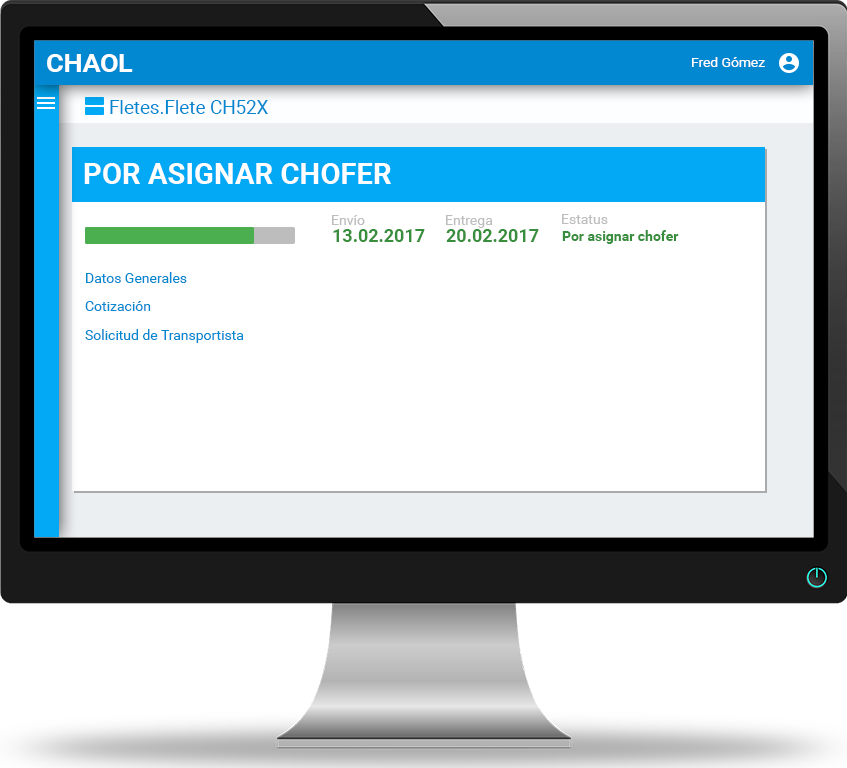
<style>
.page{position:relative;width:847px;height:768px;background:#ffffff}
.page>*{position:absolute;margin:0}
.t1{font:25.7px "Roboto-Bold";color:#ffffff}
.t2{font:13.3px "Roboto-Regular";color:#ffffff;scale:1.04 1}
.t3{font:18.6px "Roboto-Regular";color:#0288d1}
.t4{font:29.1px "Roboto-Bold";color:#ffffff}
.t5{font:14px "Roboto-Regular";color:#bdbdbd}
.t6{font:18px "Roboto-Bold";color:#388e3c}
.t7{font:14px "Roboto-Bold";color:#388e3c}
.t8{font:14.2px "Roboto-Regular";color:#0288d1}
</style>
<div class="page">
<p class="t1" style="left:47px;top:54px;width:86px;height:18px">CHAOL</p>
<p class="t2" style="left:692px;top:57px;width:73px;height:10px">Fred Gómez</p>
<p class="t3" style="left:110px;top:100px;width:158px;height:14px">Fletes.Flete CH52X</p>
<p class="t4" style="left:84px;top:163px;width:307px;height:21px">POR ASIGNAR CHOFER</p>
<p class="t5" style="left:332px;top:215px;width:33px;height:10px">Envío</p>
<p class="t5" style="left:446px;top:215px;width:47px;height:13px">Entrega</p>
<p class="t5" style="left:562px;top:214px;width:46px;height:10px">Estatus</p>
<p class="t6" style="left:333px;top:229px;width:92px;height:13px">13.02.2017</p>
<p class="t6" style="left:446px;top:229px;width:93px;height:13px">20.02.2017</p>
<p class="t7" style="left:562px;top:230px;width:117px;height:14px">Por asignar chofer</p>
<p class="t8" style="left:86px;top:272px;width:101px;height:11px">Datos Generales</p>
<p class="t8" style="left:85px;top:301px;width:66px;height:10px">Cotización</p>
<p class="t8" style="left:85px;top:329px;width:159px;height:14px">Solicitud de Transportista</p>
</div>
